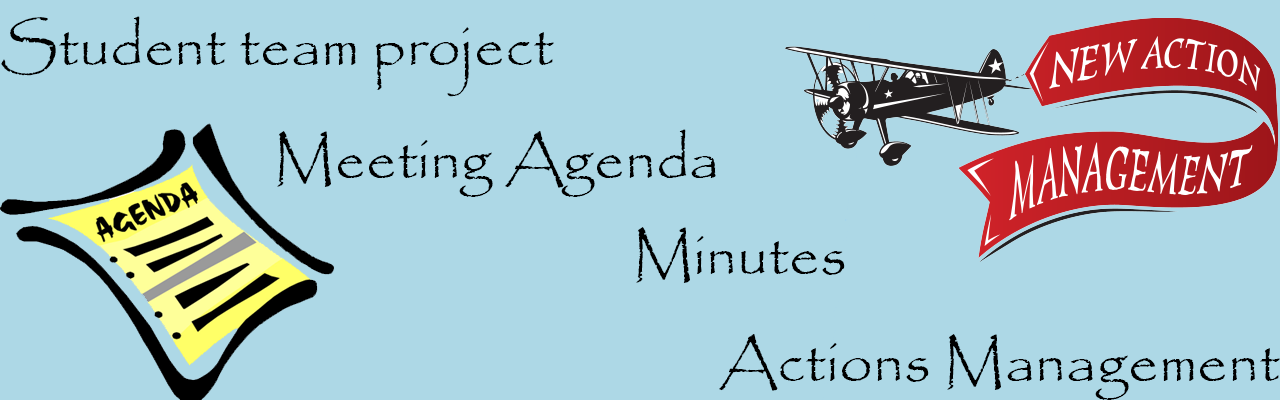
<style>
.page{position:relative;width:1280px;height:400px;background:#add8e6}
.page>*{position:absolute;margin:0}
.t1{font:60px "Papyrus-Regular";color:#000000}
</style>
<div class="page">
<p class="t1" style="left:1px;top:16px;width:553px;height:81px">Student team project</p>
<p class="t1" style="left:277px;top:129px;width:439px;height:68px">Meeting Agenda</p>
<p class="t1" style="left:636px;top:227px;width:209px;height:56px">Minutes</p>
<p class="t1" style="left:719px;top:334px;width:561px;height:66px">Actions Management</p>
</div>
